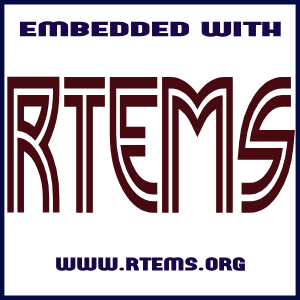
<style>
.page{position:relative;width:300px;height:300px;background:#ffffff}
.page>*{position:absolute;margin:0}
.t1{font:24.4px "FORQUE";color:#1a0749;scale:2.15 1}
.t2{font:179.9px "MadisonSquareIncised";color:#460a10;scale:0.56 1}
.t3{font:21.5px "FORQUE";color:#1a0749;scale:1.6 1}
</style>
<div class="page">
<p class="t1" style="left:19px;top:21px;width:262px;height:16px">embedded with</p>
<p class="t2" style="left:7px;top:76px;width:288px;height:137px">rtems</p>
<p class="t3" style="left:56px;top:257px;width:189px;height:14px">www.rtems.org</p>
</div>
